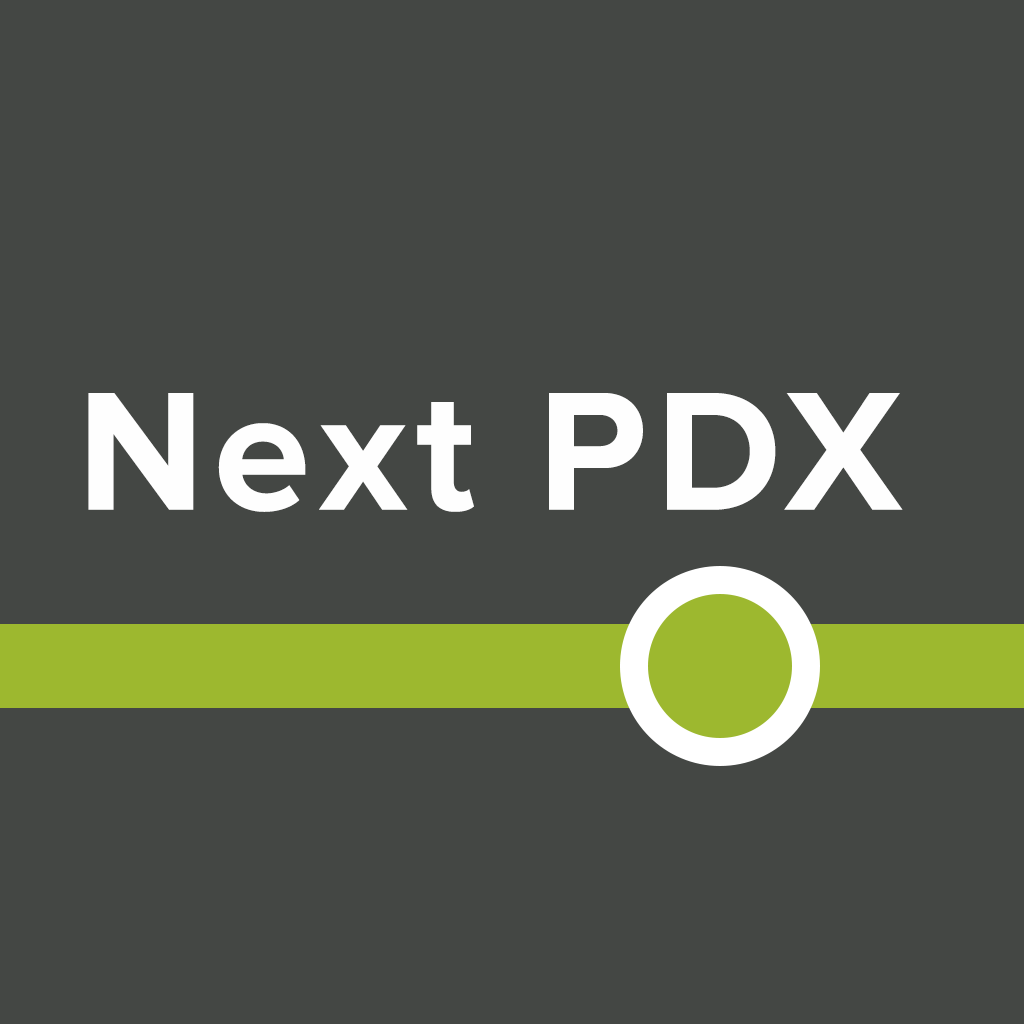
<style>
.page{position:relative;width:1024px;height:1024px;background:#444744}
.page>*{position:absolute;margin:0}
.t1{font:175px "ProximaNova-Bold";letter-spacing:0.05em;color:#fefefe}
</style>
<div class="page">
<p class="t1" style="left:88px;top:393px;width:815px;height:119px">Next PDX</p>
</div>
